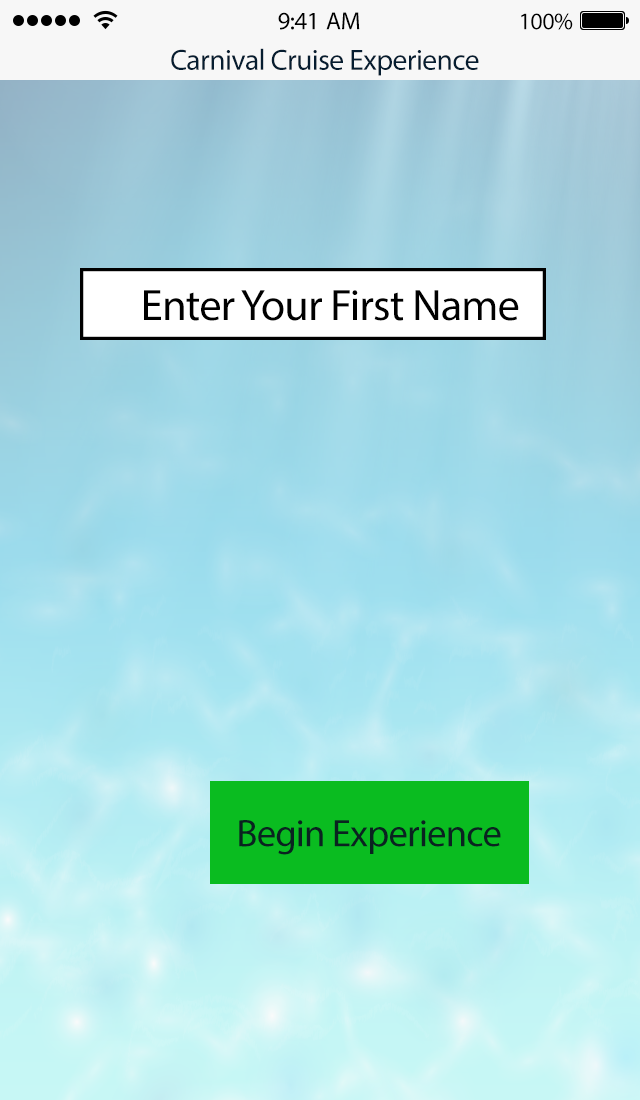
<style>
.page{position:relative;width:640px;height:1100px}
.page>*{position:absolute;margin:0}
.t1{font:25px "MyriadPro-Regular";letter-spacing:-0.02em;color:#000000}
.t2{font:24px "MyriadPro-Regular";letter-spacing:-0.02em;color:#000000}
.t3{font:29.4px "MyriadPro-Regular";letter-spacing:-0.02em;color:#061d30}
.t4{font:44.2px "MyriadPro-Regular";letter-spacing:-0.02em;color:#000000}
.t5{font:38.6px "MyriadPro-Regular";letter-spacing:-0.02em;color:#0a2320}
</style>
<div class="page">
<p class="t1" style="left:278px;top:12px;width:82px;height:18px">9:41 AM</p>
<p class="t2" style="left:521px;top:13px;width:52px;height:17px">100%</p>
<p class="t3" style="left:171px;top:48px;width:308px;height:28px">Carnival Cruise Experience</p>
<p class="t4" style="left:144px;top:290px;width:375px;height:31px">Enter Your First Name</p>
<p class="t5" style="left:239px;top:820px;width:262px;height:35px">Begin Experience</p>
</div>
